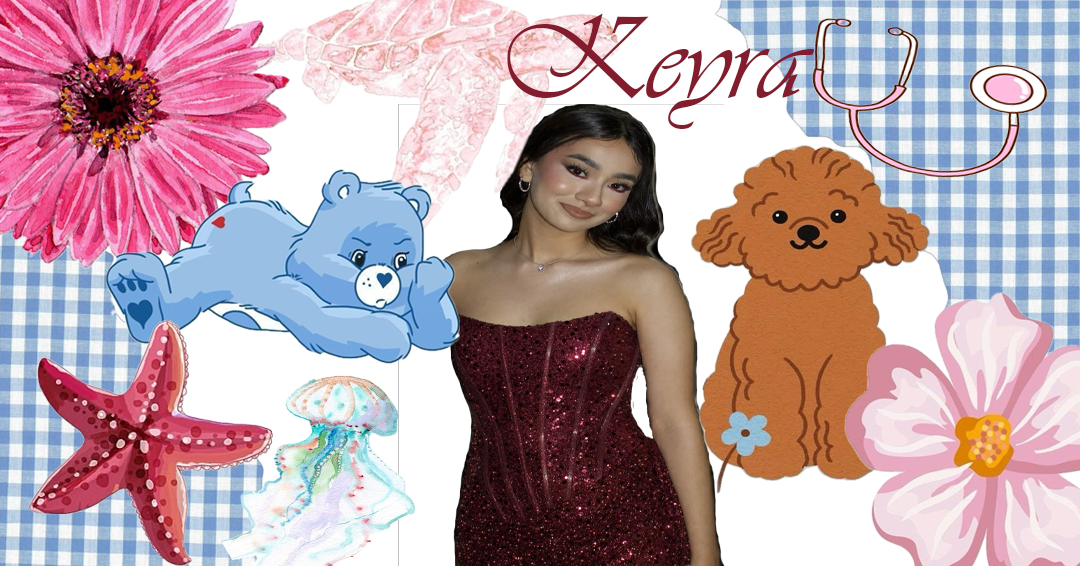
<style>
.page{position:relative;width:1080px;height:566px}
.page>*{position:absolute;margin:0}
.t1{font:122px "Vivaldii";color:#831c2d}
</style>
<div class="page">
<p class="t1" style="left:507px;top:13px;width:308px;height:116px">Keyra</p>
</div>
